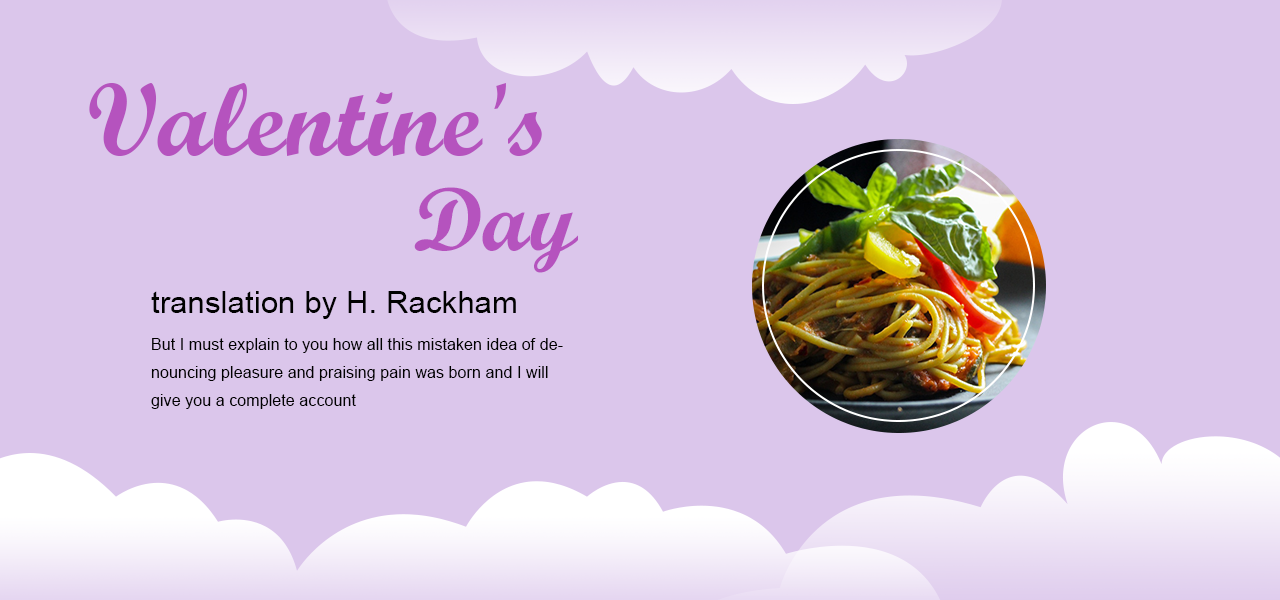
<style>
.page{position:relative;width:1280px;height:600px;background:#dbc6eb}
.page>*{position:absolute;margin:0}
.t1{font:104.5px/110px "ScriptMTBold";letter-spacing:0.005em;color:#b553be}
.t2{font:90px/95px "ScriptMTBold";letter-spacing:0.005em;color:#b553be}
.t3{font:31.3px "ArialMT";letter-spacing:0.005em;color:#010101}
.t4{font:16px/28px "ArialMT";letter-spacing:0.005em;color:#000000}
</style>
<div class="page">
<p class="t1" style="left:89px;top:83px;width:489px;height:190px;text-align:right">Valentine's <br><span class="t2">Day</span></p>
<p class="t3" style="left:151px;top:291px;width:365px;height:28px">translation by H. Rackham</p>
<p class="t4" style="left:151px;top:338px;width:412px;height:71px">But I must explain to you how all this mistaken idea of denouncing pleasure and praising pain was born and I will give you a complete account</p>
</div>
